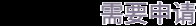
<style>
.page{position:relative;width:196px;height:26px;background:#000000}
.page>*{position:absolute;margin:0}
.t1{font:24px "WebPSD-18463539-0-Regular";color:#837a91;font-weight:bold}
</style>
<div class="page">
<p class="t1" style="left:0px;top:0px;width:196px;height:26px">需要申请</p>
</div>
